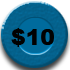
<style>
.page{position:relative;width:70px;height:70px}
.page>*{position:absolute;margin:0}
.t1{font:22px "Arial-Black";color:#010101}
</style>
<div class="page">
<p class="t1" style="left:11px;top:28px;width:43px;height:19px">$10</p>
</div>
